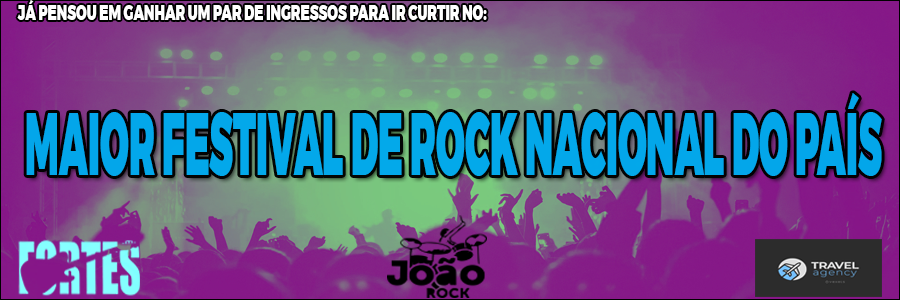
<style>
.page{position:relative;width:900px;height:300px}
.page>*{position:absolute;margin:0}
.t1{font:21.1px "Montserrat-Black";color:#ffffff;scale:0.63 1}
.t2{font:87.3px "Montserrat-Black";color:#00a8ec;scale:0.41 1}
</style>
<div class="page">
<p class="t1" style="left:17px;top:0px;width:470px;height:20px">JÁ PENSOU EM GANHAR UM PAR DE INGRESSOS PARA IR CURTIR NO:</p>
<p class="t2" style="left:26px;top:93px;width:856px;height:83px">MAIOR FESTIVAL DE ROCK NACIONAL DO PAÍS</p>
</div>
